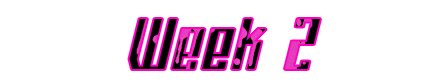
<style>
.page{position:relative;width:443px;height:82px;background:#ffffff}
.page>*{position:absolute;margin:0}
.t1{font:80px "PlatformEight";color:#000000}
</style>
<div class="page">
<p class="t1" style="left:129px;top:19px;width:191px;height:50px">Week 2</p>
</div>
